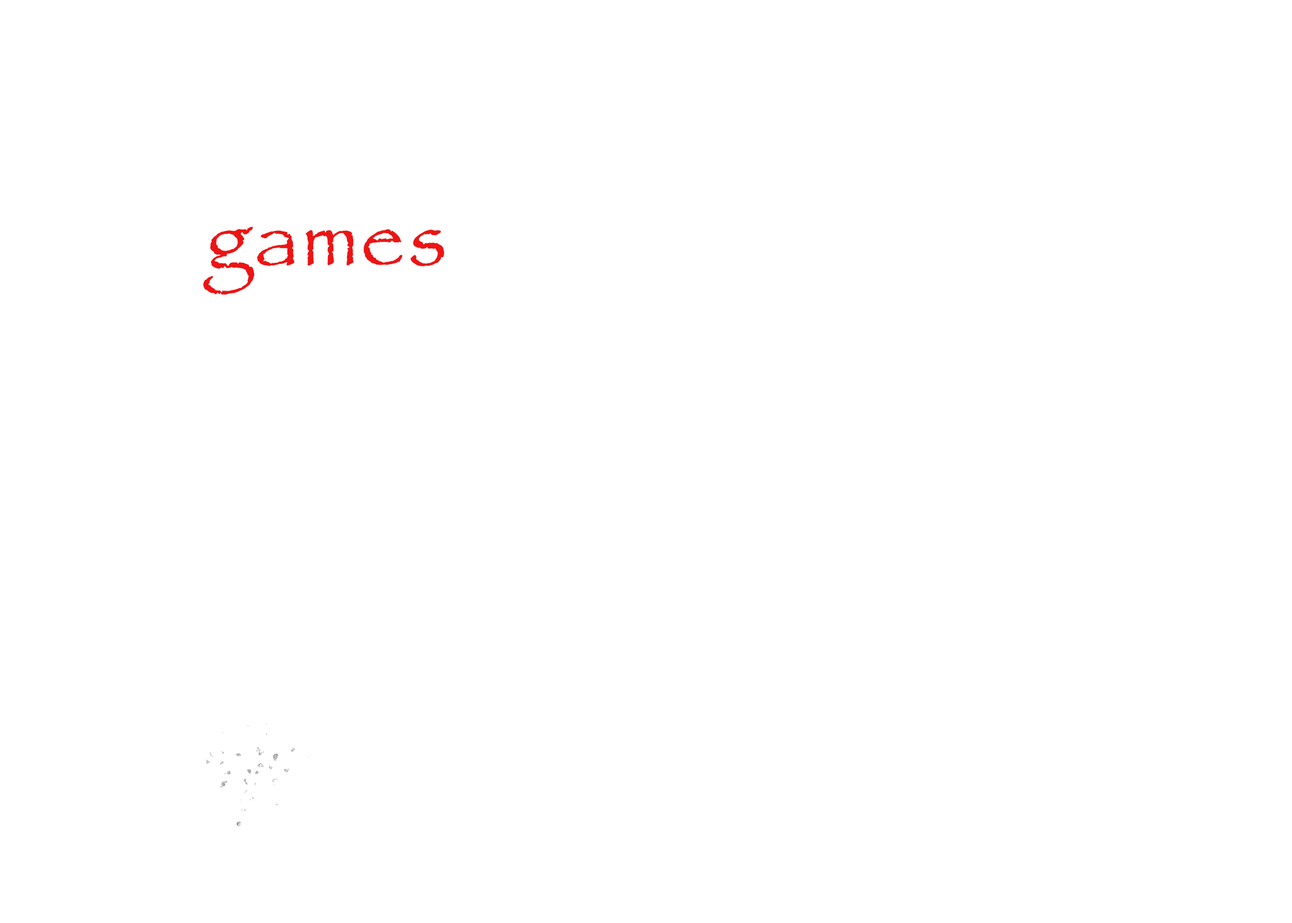
<style>
.page{position:relative;width:1292px;height:923px;background:#ffffff}
.page>*{position:absolute;margin:0}
.t1{font:92.3px "Papyrus-Regular";color:#ec1414}
</style>
<div class="page">
<p class="t1" style="left:203px;top:226px;width:241px;height:69px">games</p>
</div>
